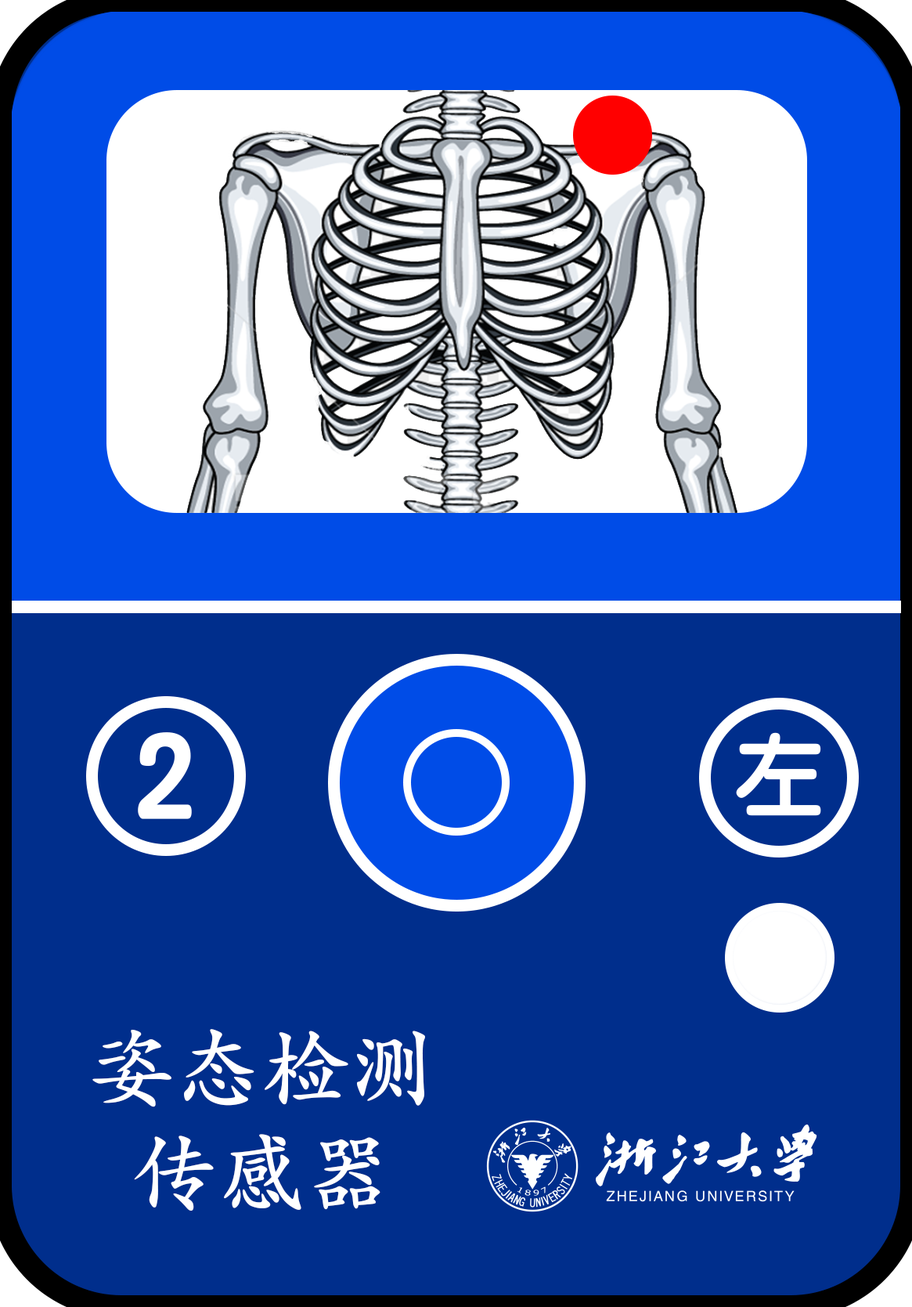
<style>
.page{position:relative;width:912px;height:1307px;background:#002e8c}
.page>*{position:absolute;margin:0}
.t1{font:121.8px "STYuanti-TC-Bold";letter-spacing:0.1em;color:#ffffff}
.t2{font:87px "STYuanti-TC-Bold";letter-spacing:0.1em;color:#ffffff}
.t3{font:87.6px "STKaitiTC-Bold";color:#ffffff}
</style>
<div class="page">
<p class="t1" style="left:138px;top:732px;width:54px;height:87px">2</p>
<p class="t2" style="left:736px;top:732px;width:85px;height:84px">左</p>
<p class="t3" style="left:92px;top:1029px;width:333px;height:182px;text-align:center">姿态检测<br>传感器</p>
</div>
